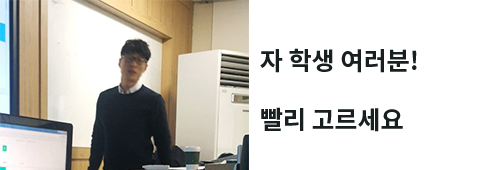
<style>
.page{position:relative;width:500px;height:170px;background:#ffffff}
.page>*{position:absolute;margin:0}
.t1{font:25px "NotoSansCJKkr-Bold";color:#171f21}
.t2{font:8.3px "NotoSansCJKkr-Bold";color:#171f21}
</style>
<div class="page">
<p class="t1" style="left:260px;top:48px;width:157px;height:84px"><span class="t2"><br></span>자 학생 여러분!<br><br>빨리 고르세요</p>
</div>
